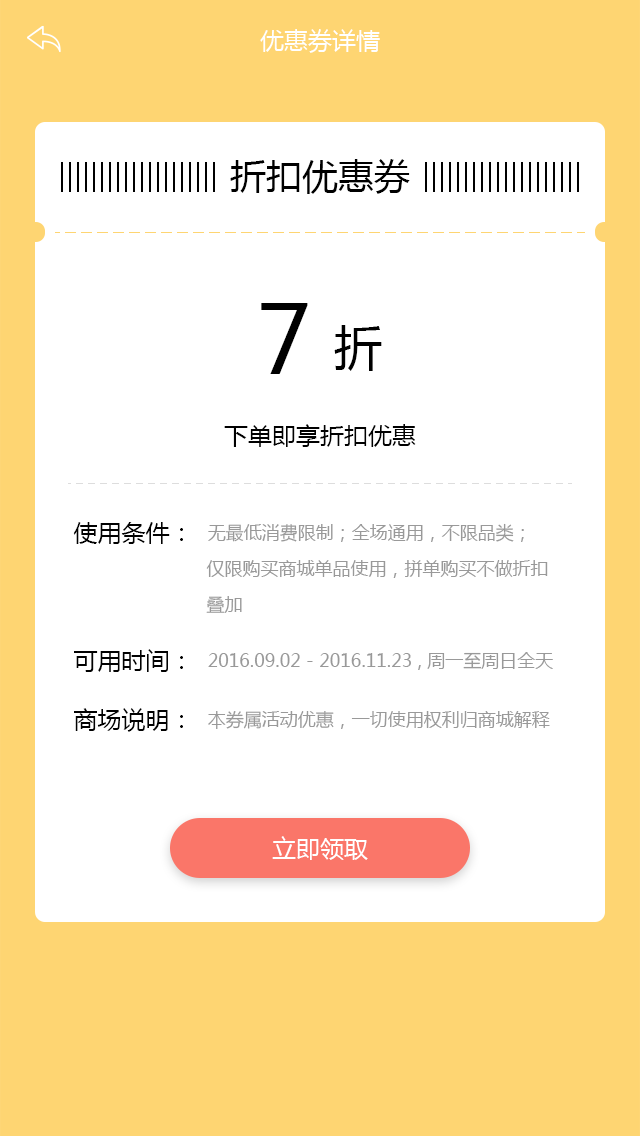
<style>
.page{position:relative;width:640px;height:1136px;background:#ffffff}
.page>*{position:absolute;margin:0}
.t1{font:24px "MicrosoftYaHei";color:#ffffff}
.t2{font:36px "MicrosoftYaHei";color:#000000}
.t3{font:94px "MicrosoftYaHei";color:#000000}
.t4{font:48px "MicrosoftYaHei";color:#000000}
.t5{font:24px "MicrosoftYaHei";color:#000000}
.t6{font:18px/36px "MicrosoftYaHei";color:#999999}
.t7{font:24px/36px "MicrosoftYaHei";color:#010101}
.t8{font:18px "MicrosoftYaHei";color:#999999}
.t9{font:24px "MicrosoftYaHei";color:#010101}
</style>
<div class="page">
<p class="t1" style="left:260px;top:29px;width:120px;height:24px">优惠券详情</p>
<p class="t2" style="left:230px;top:159px;width:180px;height:35px">折扣优惠券</p>
<p class="t3" style="left:261px;top:303px;width:121px;height:71px">7 <span class="t4">折</span></p>
<p class="t5" style="left:224px;top:424px;width:192px;height:23px">下单即享折扣优惠</p>
<p class="t6" style="left:73px;top:522px;width:475px;height:91px"><span class="t7">使用条件：  </span>无最低消费限制；全场通用，不限品类；<br>                         仅限购买商城单品使用，拼单购买不做折扣<br>                         叠加</p>
<p class="t8" style="left:74px;top:649px;width:479px;height:23px"><span class="t9">可用时间：  </span>2016.09.02 - 2016.11.23 , 周一至周日全天</p>
<p class="t8" style="left:74px;top:708px;width:476px;height:24px"><span class="t9">商场说明：  </span>本券属活动优惠，一切使用权利归商城解释</p>
<p class="t1" style="left:272px;top:836px;width:96px;height:24px">立即领取</p>
</div>
